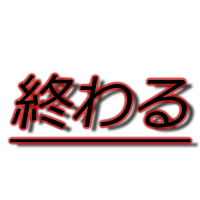
<style>
.page{position:relative;width:200px;height:200px;background:#ffffff}
.page>*{position:absolute;margin:0}
.t1{font:60px "Meiryo";color:#000000;font-style:italic;text-decoration:underline}
</style>
<div class="page">
<p class="t1" style="left:10px;top:74px;width:181px;height:69px">終わる</p>
</div>
